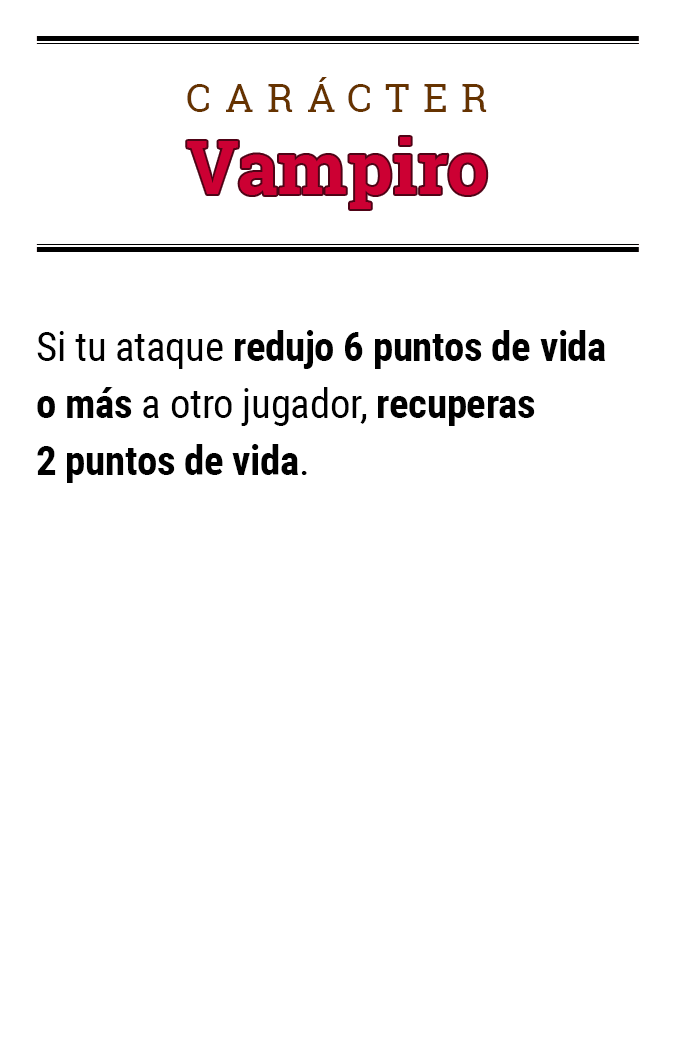
<style>
.page{position:relative;width:675px;height:1050px;background:#ffffff}
.page>*{position:absolute;margin:0}
.t1{font:39.2px "RobotoSlab-Regular";letter-spacing:0.34em;color:#663300}
.t2{font:74.5px "RobotoSlab-Bold";color:#cc0033}
.t3{font:41.1px/57.1px "RobotoCondensed-Bold";letter-spacing:-0.01em;color:#000000}
.t4{font:41.1px/57.1px "RobotoCondensed-Regular";letter-spacing:-0.01em;color:#000000}
</style>
<div class="page">
<p class="t1" style="left:187px;top:77px;width:300px;height:35px">CARÁCTER</p>
<p class="t2" style="left:187px;top:137px;width:300px;height:72px">Vampiro</p>
<p class="t3" style="left:37px;top:330px;width:569px;height:153px"><span class="t4">Si tu ataque </span>redujo 6 puntos de vida<br>o más<span class="t4"> a otro jugador, </span>recuperas<br>2 puntos de vida<span class="t4">.</span></p>
</div>
